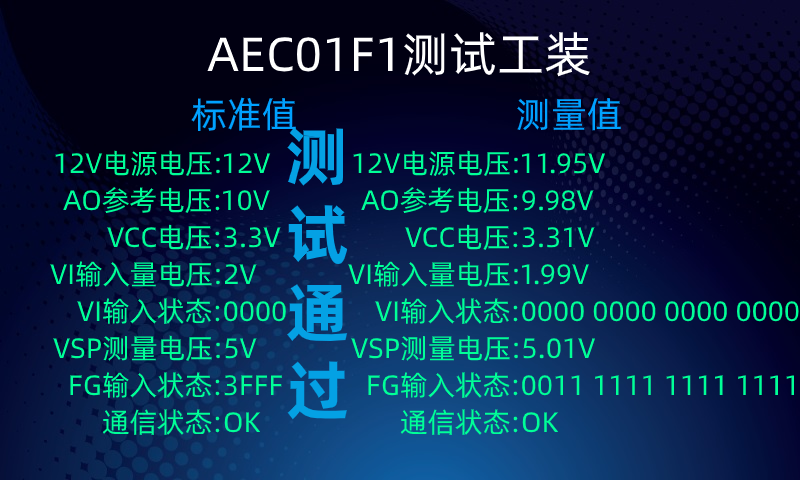
<style>
.page{position:relative;width:800px;height:480px}
.page>*{position:absolute;margin:0}
.t1{font:48px "AlibabaPuHuiTi-Regular";color:#ffffff}
.t2{font:36px "AlibabaPuHuiTi-Regular";color:#00a1ff}
.t3{font:65px "AlibabaPuHuiTi-Bold";color:#04a1e4}
.t4{font:28px "AlibabaPuHuiTi-Regular";color:#00ff97}
</style>
<div class="page">
<p class="t1" style="left:207px;top:32px;width:383px;height:45px">AEC01F1测试工装</p>
<p class="t2" style="left:191px;top:97px;width:105px;height:35px">标准值</p>
<p class="t2" style="left:517px;top:98px;width:104px;height:33px">测量值</p>
<p class="t3" style="left:287px;top:127px;width:61px;height:293px">测<br>试<br>通<br>过</p>
<p class="t4" style="left:55px;top:150px;width:216px;height:26px">12V电源电压:12V</p>
<p class="t4" style="left:353px;top:150px;width:252px;height:26px">12V电源电压:11.95V</p>
<p class="t4" style="left:63px;top:187px;width:207px;height:26px">AO参考电压:10V</p>
<p class="t4" style="left:361px;top:187px;width:233px;height:26px">AO参考电压:9.98V</p>
<p class="t4" style="left:107px;top:224px;width:174px;height:26px">VCC电压:3.3V</p>
<p class="t4" style="left:405px;top:224px;width:190px;height:26px">VCC电压:3.31V</p>
<p class="t4" style="left:50px;top:261px;width:207px;height:26px">VI输入量电压:2V</p>
<p class="t4" style="left:348px;top:261px;width:241px;height:26px">VI输入量电压:1.99V</p>
<p class="t4" style="left:77px;top:298px;width:209px;height:26px">VI输入状态:0000</p>
<p class="t4" style="left:375px;top:298px;width:424px;height:26px">VI输入状态:0000 0000 0000 0000</p>
<p class="t4" style="left:53px;top:335px;width:204px;height:26px">VSP测量电压:5V</p>
<p class="t4" style="left:351px;top:335px;width:244px;height:26px">VSP测量电压:5.01V</p>
<p class="t4" style="left:70px;top:372px;width:212px;height:26px">FG输入状态:3FFF</p>
<p class="t4" style="left:368px;top:372px;width:426px;height:26px">FG输入状态:0011 1111 1111 1111</p>
<p class="t4" style="left:102px;top:409px;width:159px;height:26px">通信状态:OK</p>
<p class="t4" style="left:400px;top:409px;width:159px;height:26px">通信状态:OK</p>
</div>
